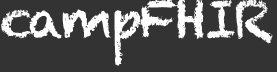
<style>
.page{position:relative;width:277px;height:72px;background:#333333}
.page>*{position:absolute;margin:0}
.t1{font:52px "Chalkduster";letter-spacing:-0.05em;color:#ffffff}
</style>
<div class="page">
<p class="t1" style="left:1px;top:0px;width:272px;height:66px">campFHIR</p>
</div>
